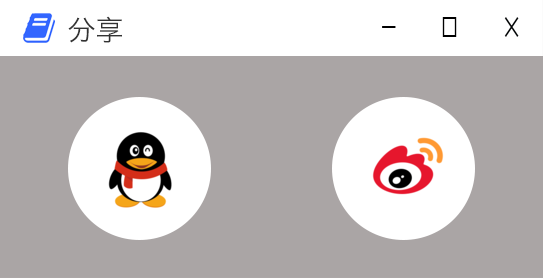
<style>
.page{position:relative;width:543px;height:278px;background:#aaa5a5}
.page>*{position:absolute;margin:0}
.t1{font:27.9px "HiraginoSansGB-W3";color:#333333}
</style>
<div class="page">
<p class="t1" style="left:68px;top:16px;width:54px;height:27px">分享</p>
</div>
